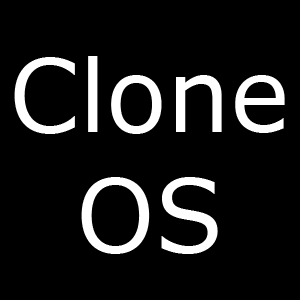
<style>
.page{position:relative;width:300px;height:300px;background:#000000}
.page>*{position:absolute;margin:0}
.t1{font:100px "Verdana";color:#ffffff}
</style>
<div class="page">
<p class="t1" style="left:14px;top:56px;width:271px;height:198px;text-align:center">Clone<br>OS</p>
</div>
